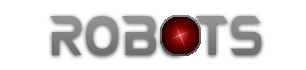
<style>
.page{position:relative;width:306px;height:70px;background:#ffffff}
.page>*{position:absolute;margin:0}
.t1{font:55.6px "NEOTERIQUE";letter-spacing:0.024em;color:#818181}
.t2{font:48.6px "NEOTERIQUE";letter-spacing:0.104em;color:#818181}
</style>
<div class="page">
<p class="t1" style="left:50px;top:16px;width:212px;height:40px">r0b<span class="t2">0</span>ts</p>
</div>
